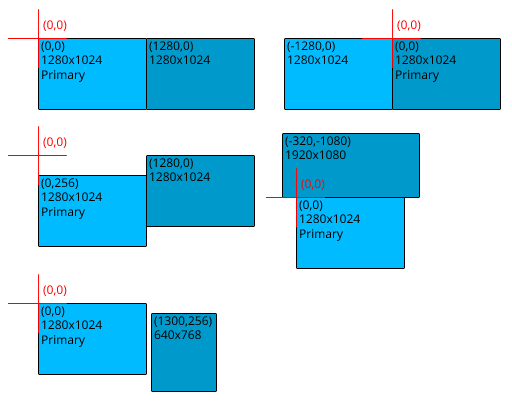
<style>
.page{position:relative;width:512px;height:401px;background:#ffffff}
.page>*{position:absolute;margin:0}
.t1{font:12px "OpenSans-Regular";color:#ff0000}
.t2{font:12px "OpenSans-Regular";color:#000000}
</style>
<div class="page">
<p class="t1" style="left:43px;top:20px;width:24px;height:11px">(0,0)</p>
<p class="t1" style="left:397px;top:20px;width:24px;height:11px">(0,0)</p>
<p class="t2" style="left:41px;top:41px;width:61px;height:41px">(0,0)<br>1280x1024<br>Primary</p>
<p class="t2" style="left:149px;top:41px;width:61px;height:24px">(1280,0)<br>1280x1024</p>
<p class="t2" style="left:287px;top:41px;width:61px;height:24px">(-1280,0)<br>1280x1024</p>
<p class="t2" style="left:395px;top:41px;width:61px;height:41px">(0,0)<br>1280x1024<br>Primary</p>
<p class="t1" style="left:43px;top:137px;width:24px;height:11px">(0,0)</p>
<p class="t2" style="left:285px;top:136px;width:66px;height:24px">(-320,-1080)<br>1920x1080</p>
<p class="t2" style="left:149px;top:158px;width:61px;height:24px">(1280,0)<br>1280x1024</p>
<p class="t2" style="left:41px;top:178px;width:61px;height:41px">(0,256)<br>1280x1024<br>Primary</p>
<p class="t1" style="left:301px;top:179px;width:24px;height:11px">(0,0)</p>
<p class="t2" style="left:299px;top:200px;width:61px;height:41px">(0,0)<br>1280x1024<br>Primary</p>
<p class="t1" style="left:43px;top:285px;width:24px;height:11px">(0,0)</p>
<p class="t2" style="left:41px;top:306px;width:61px;height:41px">(0,0)<br>1280x1024<br>Primary</p>
<p class="t2" style="left:154px;top:316px;width:58px;height:24px">(1300,256)<br>640x768</p>
</div>
